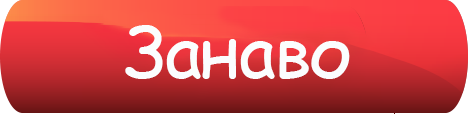
<style>
.page{position:relative;width:468px;height:114px}
.page>*{position:absolute;margin:0}
.t1{font:72px "ComicSansMS";letter-spacing:-0.02em;color:#fbfdfe}
</style>
<div class="page">
<p class="t1" style="left:125px;top:25px;width:225px;height:54px">Занаво</p>
</div>
